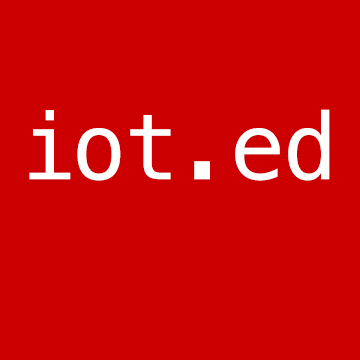
<style>
.page{position:relative;width:360px;height:360px;background:#cc0000}
.page>*{position:absolute;margin:0}
.t1{font:91.4px "Menlo-Regular";letter-spacing:-0.025em;color:#ffffff}
</style>
<div class="page">
<p class="t1" style="left:29px;top:109px;width:301px;height:72px">iot.ed</p>
</div>
